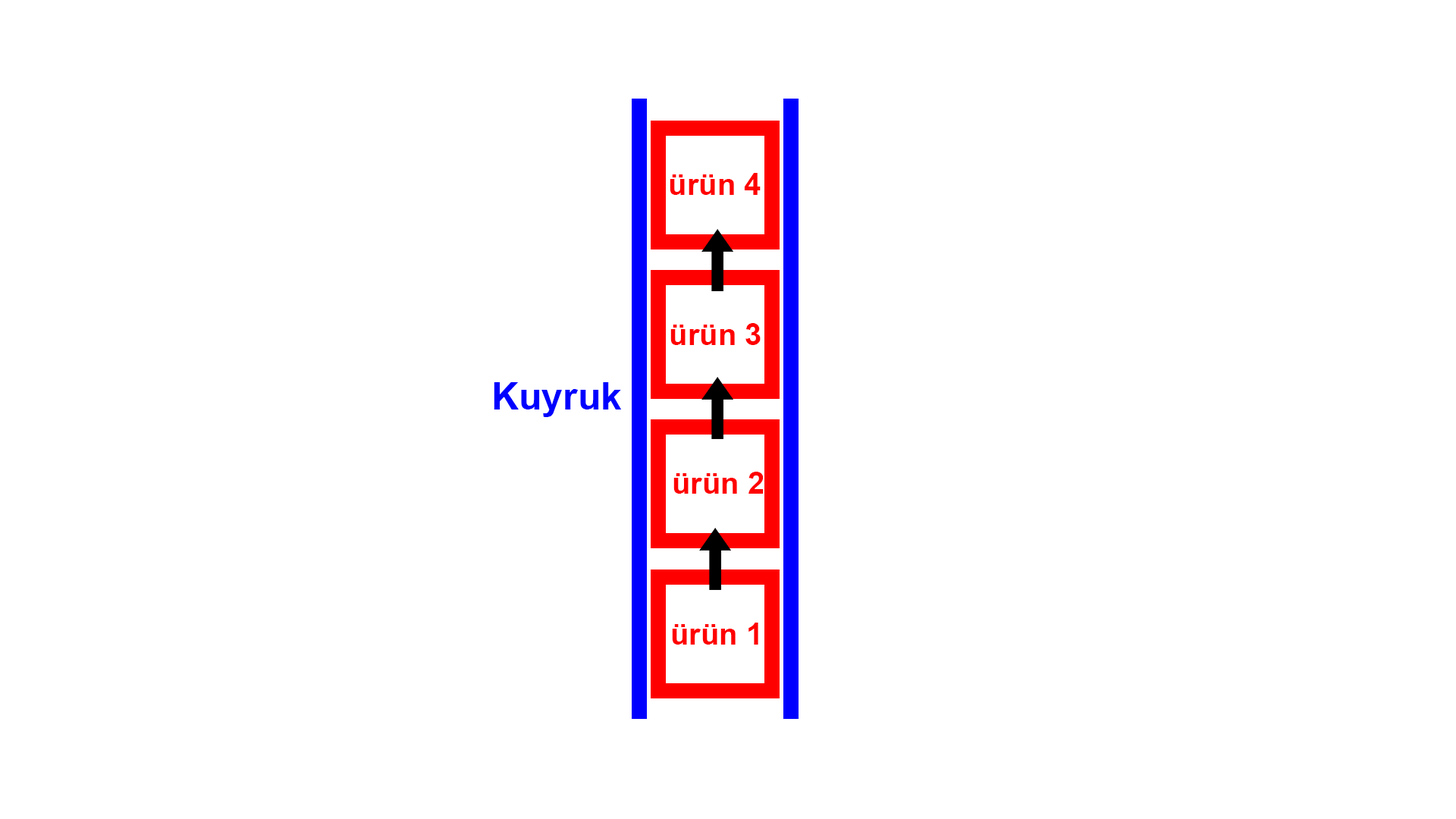
<style>
.page{position:relative;width:1456px;height:819px;background:#ffffff}
.page>*{position:absolute;margin:0}
.t1{font:30.3px "Arial-BoldMT";color:#ff0000}
.t2{font:37.9px "Arial-BoldMT";color:#0000ff}
</style>
<div class="page">
<p class="t1" style="left:670px;top:173px;width:91px;height:22px">ürün 4</p>
<p class="t1" style="left:670px;top:323px;width:91px;height:22px">ürün 3</p>
<p class="t2" style="left:494px;top:382px;width:128px;height:35px">Kuyruk</p>
<p class="t1" style="left:673px;top:472px;width:91px;height:22px">ürün 2</p>
<p class="t1" style="left:672px;top:623px;width:86px;height:22px">ürün 1</p>
</div>
